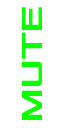
<style>
.page{position:relative;width:64px;height:128px;background:#ffffff}
.page>*{position:absolute;margin:0}
.t1{font:30.8px "Xolonium-Bold";color:#0cff00}
</style>
<div class="page">
<p class="t1" style="left:22px;top:7px;width:20px;height:113px;rotate:-90deg">MUTE</p>
</div>
